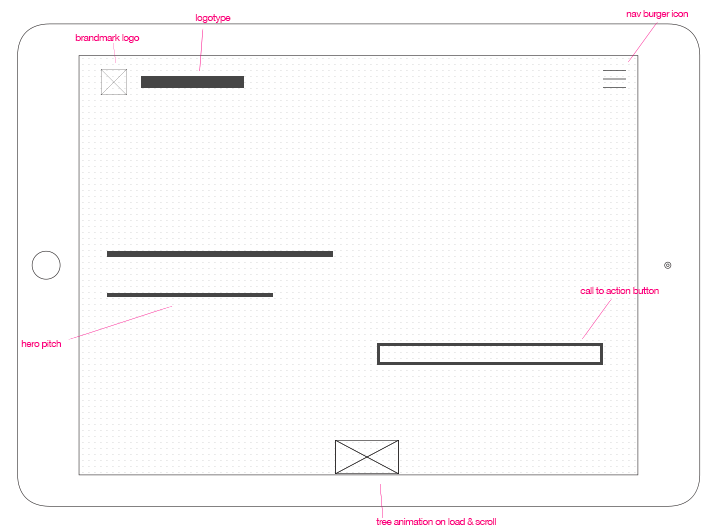
<style>
.page{position:relative;width:717px;height:530px;background:#ffffff}
.page>*{position:absolute;margin:0}
.t1{font:10px "HelveticaNeue";letter-spacing:-0.05em;color:#fc0183}
</style>
<div class="page">
<p class="t1" style="left:195px;top:14px;width:36px;height:9px">logotype</p>
<p class="t1" style="left:626px;top:10px;width:62px;height:9px">nav burger icon</p>
<p class="t1" style="left:75px;top:34px;width:65px;height:9px">brandmark logo</p>
<p class="t1" style="left:580px;top:287px;width:79px;height:7px">call to action button</p>
<p class="t1" style="left:21px;top:340px;width:40px;height:9px">hero pitch</p>
<p class="t1" style="left:376px;top:518px;width:120px;height:7px">tree animation on load &amp; scroll</p>
</div>
